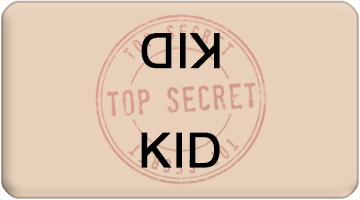
<style>
.page{position:relative;width:360px;height:200px;background:#e8d0bb}
.page>*{position:absolute;margin:0}
.t1{font:48px "ArialMT";color:#000000;font-weight:bold}
</style>
<div class="page">
<p class="t1" style="left:141px;top:33px;width:79px;height:36px;rotate:180deg">KID</p>
<p class="t1" style="left:141px;top:132px;width:79px;height:36px">KID</p>
</div>
